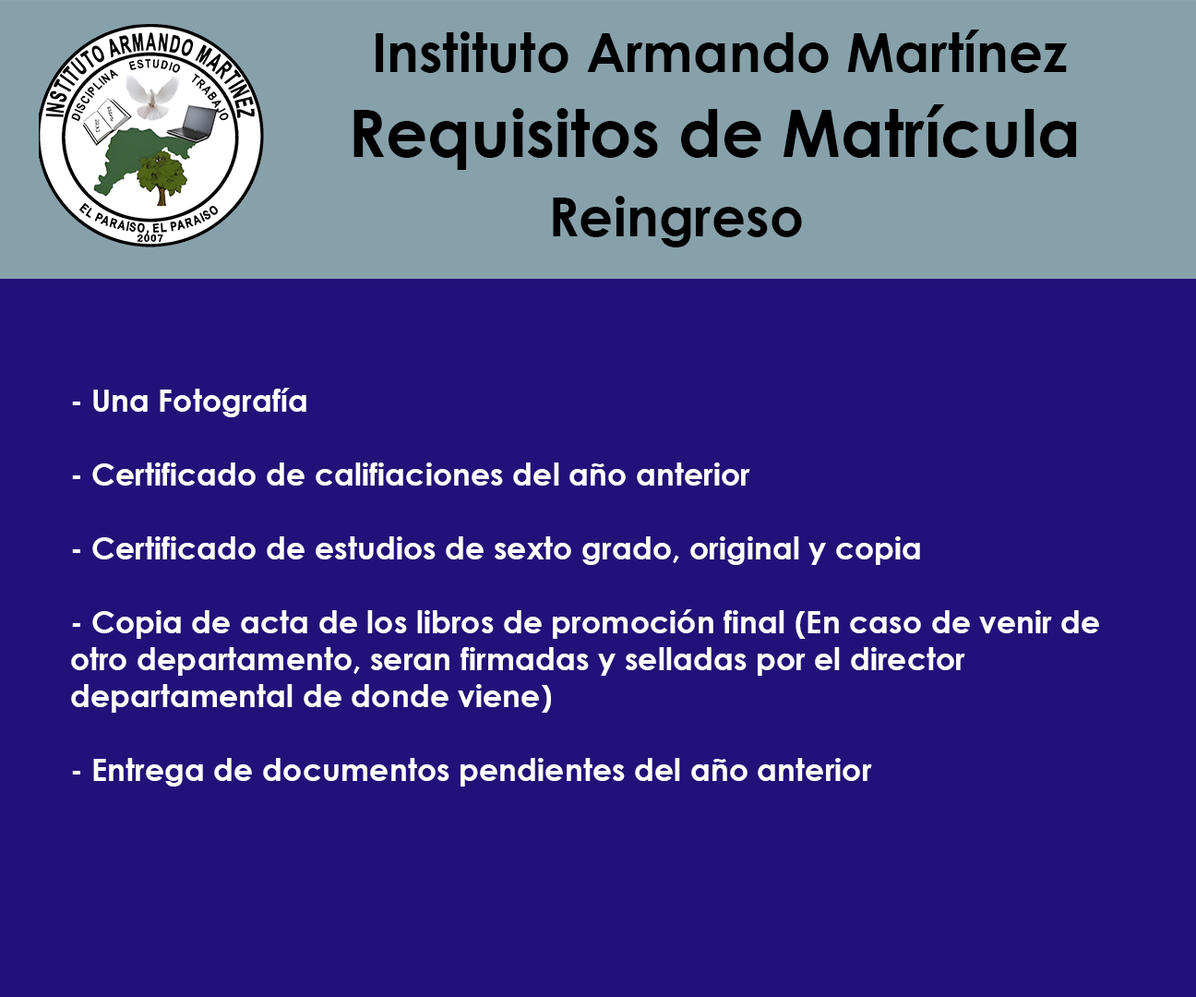
<style>
.page{position:relative;width:1196px;height:997px;background:#221179}
.page>*{position:absolute;margin:0}
.t1{font:53.8px "CenturyGothic-Bold";color:#000000}
.t2{font:65.4px "CenturyGothic-Bold";color:#000000}
.t3{font:30.8px "CenturyGothic-Bold";color:#ffffff}
</style>
<div class="page">
<p class="t1" style="left:376px;top:30px;width:692px;height:43px">Instituto Armando Martínez</p>
<p class="t2" style="left:354px;top:104px;width:723px;height:66px">Requisitos de Matrícula</p>
<p class="t1" style="left:553px;top:196px;width:249px;height:51px">Reingreso</p>
<p class="t3" style="left:71px;top:388px;width:1028px;height:398px">- Una Fotografía<br><br>- Certificado de califiaciones del año anterior<br><br>- Certificado de estudios de sexto grado, original y copia<br><br>- Copia de acta de los libros de promoción final (En caso de venir de otro departamento, seran firmadas y selladas por el director departamental de donde viene)<br><br>- Entrega de documentos pendientes del año anterior</p>
</div>
